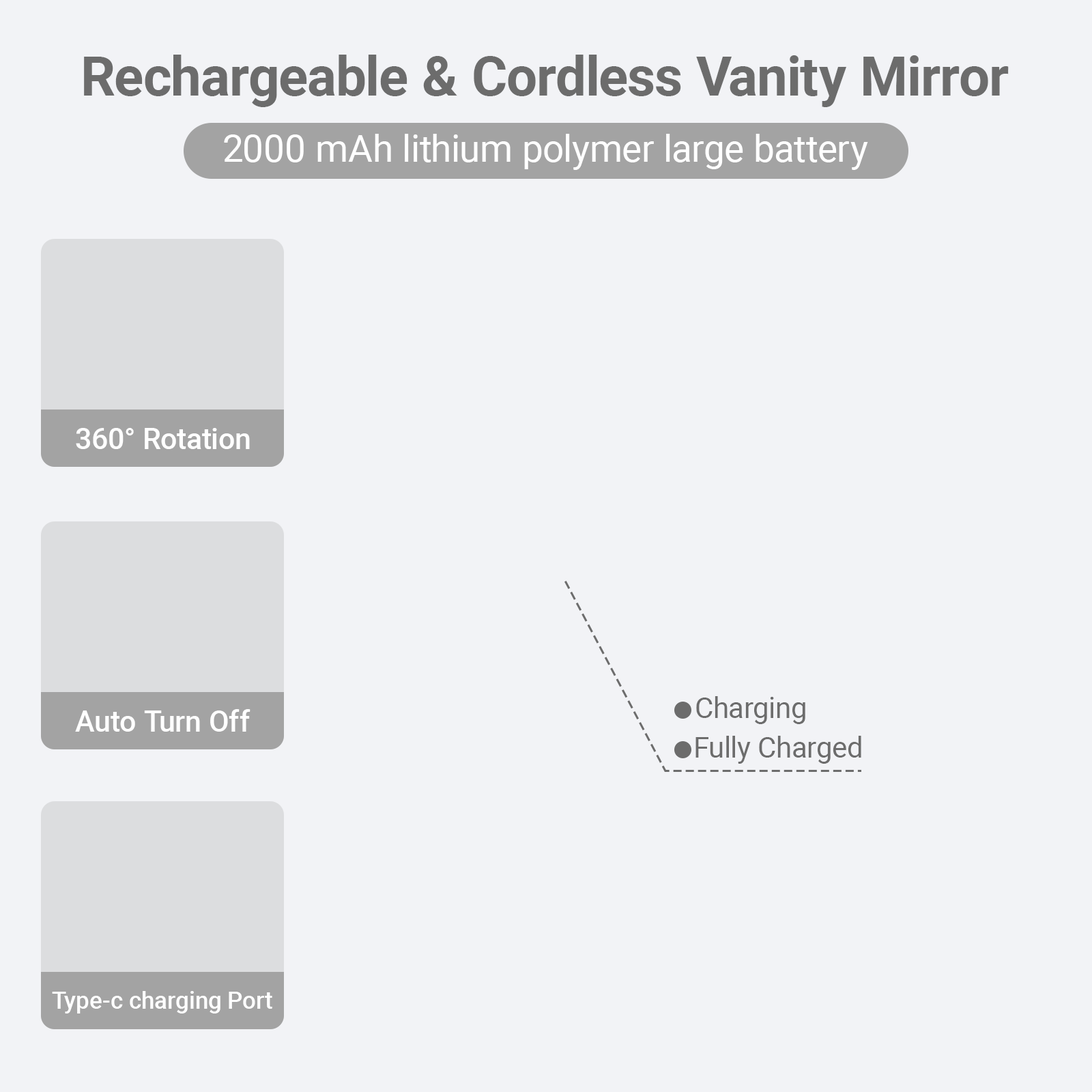
<style>
.page{position:relative;width:1092px;height:1092px;background:#f2f3f6}
.page>*{position:absolute;margin:0}
.t1{font:54.6px "Roboto-Bold";color:#6c6c6c}
.t2{font:37.5px "Roboto-Regular";color:#ffffff}
.t3{font:29.3px "Roboto-Medium";color:#ffffff}
.t4{font:28.7px "Roboto-Regular";color:#6c6c6c}
.t5{font:23.9px "Roboto-Medium";color:#ffffff}
</style>
<div class="page">
<p class="t1" style="left:84px;top:55px;width:925px;height:52px">Rechargeable &amp; Cordless Vanity Mirror</p>
<p class="t2" style="left:224px;top:134px;width:644px;height:36px">2000 mAh lithium polymer large battery</p>
<p class="t3" style="left:76px;top:428px;width:174px;height:21px">360° Rotation</p>
<p class="t4" style="left:696px;top:696px;width:109px;height:28px">Charging</p>
<p class="t3" style="left:75px;top:709px;width:175px;height:23px">Auto Turn Off</p>
<p class="t4" style="left:695px;top:736px;width:166px;height:28px">Fully Charged</p>
<p class="t5" style="left:52px;top:991px;width:220px;height:22px">Type-c charging Port</p>
</div>
